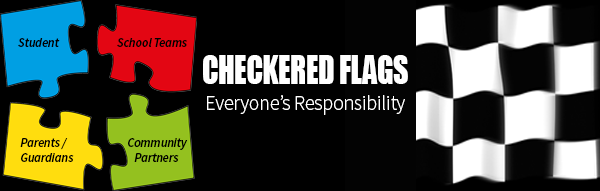
<style>
.page{position:relative;width:600px;height:191px;background:#000000}
.page>*{position:absolute;margin:0}
.t1{font:12.5px "SourceSansPro-SemiboldIt";letter-spacing:-0.01em;color:#000000}
.t2{font:37.5px "Impact";letter-spacing:-0.01em;color:#ffffff;scale:0.79 1}
.t3{font:21.1px "SourceSansPro-Light";letter-spacing:-0.01em;color:#ffffff;scale:0.95 1}
</style>
<div class="page">
<p class="t1" style="left:18px;top:38px;width:42px;height:9px">Student</p>
<p class="t1" style="left:117px;top:38px;width:70px;height:9px">School Teams</p>
<p class="t2" style="left:203px;top:55px;width:205px;height:29px">CHECKERED FLAGS</p>
<p class="t3" style="left:207px;top:95px;width:198px;height:20px">Everyone’s Responsibility</p>
<p class="t1" style="left:20px;top:138px;width:54px;height:24px">Parents / <br>Guardians</p>
<p class="t1" style="left:128px;top:138px;width:60px;height:24px">Community<br>   Partners</p>
</div>
